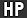
<style>
.page{position:relative;width:27px;height:18px;background:#333333}
.page>*{position:absolute;margin:0}
.t1{font:18px "Swiss721BT-BlackCondensed";color:#ffffff}
</style>
<div class="page">
<p class="t1" style="left:4px;top:2px;width:20px;height:14px">HP</p>
</div>
